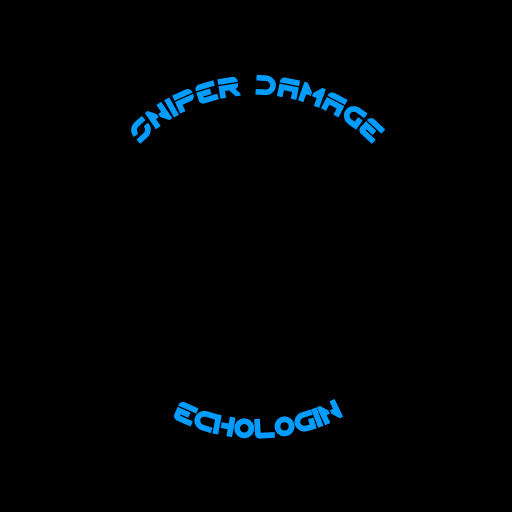
<style>
.page{position:relative;width:512px;height:512px;background:#000000}
.page>*{position:absolute;margin:0}
.t1{font:36px "Flynn";color:#009cff}
</style>
<div class="page">
<p class="t1" style="left:131px;top:74px;width:254px;height:70px;text-align:right">sniper damage</p>
<p class="t1" style="left:174px;top:399px;width:169px;height:40px">echologin</p>
</div>
